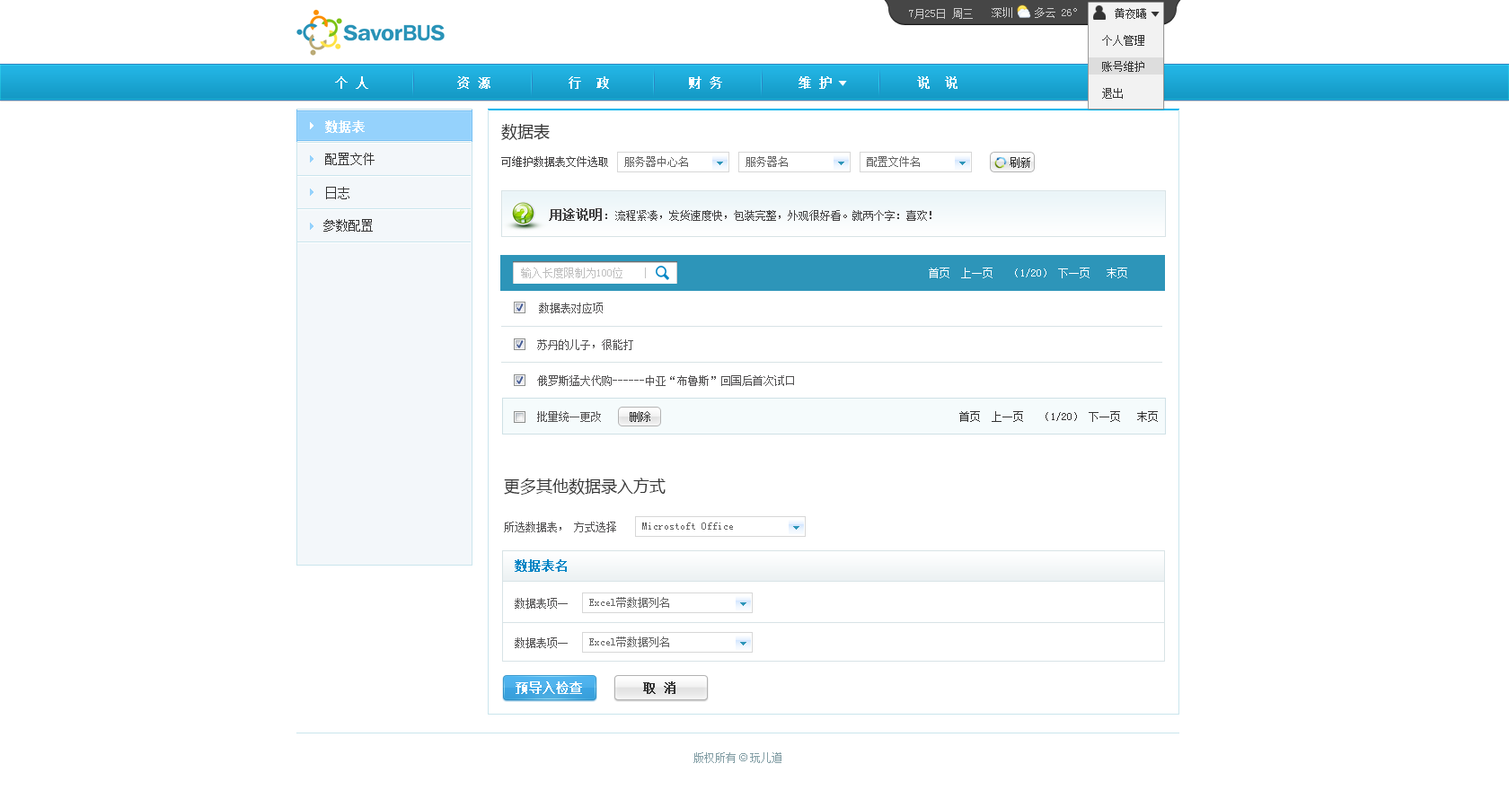
<style>
.page{position:relative;width:1509px;height:790px;background:#ffffff}
.page>*{position:absolute;margin:0}
.t1{font:10.8px "SimSun";color:#cccccc}
.t2{font:10.8px "SimSun";color:#333333}
.t3{font:12.6px "SimSun";color:#ffffff;font-weight:bold}
.t4{font:12.6px "SimSun";color:#fefefe;font-weight:bold}
.t5{font:16.2px "MicrosoftYaHei";color:#333333}
.t6{font:12.6px "SimSun";color:#333333}
.t7{font:10.8px "SimSun";color:#424142}
.t8{font:10.8px "SimSun";color:#666666}
.t9{font:12.6px "SimSun";color:#424142;font-weight:bold}
.t10{font:12.6px "SimSun";color:#424142}
.t11{font:10.8px "SimSun";color:#bfbfbf}
.t12{font:10.8px "SimSun";color:#ffffff}
.t13{font:10.8px "SimSun";color:#535253}
.t14{font:12.6px "SimSun";color:#0085c5;font-weight:bold}
.t15{font:12.6px "SimSun";color:#333333;font-weight:bold}
.t16{font:10.8px "SimSun";color:#849fa6}
.t17{font:10.8px "ArialMT";color:#849fa6}
</style>
<div class="page">
<p class="t1" style="left:909px;top:8px;width:64px;height:11px">7月25日 周三</p>
<p class="t1" style="left:991px;top:7px;width:86px;height:11px">深圳    多云 26°</p>
<p class="t2" style="left:1115px;top:8px;width:31px;height:11px">黄夜曦</p>
<p class="t2" style="left:1115px;top:8px;width:31px;height:11px">黄夜曦</p>
<p class="t2" style="left:1102px;top:35px;width:42px;height:11px">个人管理</p>
<p class="t2" style="left:1102px;top:61px;width:42px;height:11px">账号维护</p>
<p class="t3" style="left:335px;top:76px;width:622px;height:13px">个 人         资 源           行  政           财 务       维 护          说  说</p>
<p class="t2" style="left:1102px;top:88px;width:21px;height:11px">退出</p>
<p class="t4" style="left:325px;top:120px;width:40px;height:13px">数据表</p>
<p class="t5" style="left:501px;top:124px;width:49px;height:16px">数据表</p>
<p class="t6" style="left:325px;top:153px;width:50px;height:12px">配置文件</p>
<p class="t7" style="left:501px;top:156px;width:107px;height:11px">可维护数据表文件选取</p>
<p class="t8" style="left:624px;top:156px;width:64px;height:11px">服务器中心名</p>
<p class="t8" style="left:745px;top:156px;width:43px;height:11px">服务器名</p>
<p class="t8" style="left:867px;top:156px;width:53px;height:11px">配置文件名</p>
<p class="t2" style="left:1009px;top:157px;width:21px;height:11px">刷新</p>
<p class="t6" style="left:326px;top:187px;width:23px;height:12px">日志</p>
<p class="t7" style="left:549px;top:208px;width:382px;height:13px"><span class="t9">用途说明</span><span class="t10">：</span>流程紧凑，发货速度快，包装完整，外观很好看。就两个字：喜欢！</p>
<p class="t6" style="left:323px;top:219px;width:50px;height:13px">参数配置</p>
<p class="t11" style="left:521px;top:268px;width:101px;height:10px">输入长度限制为100位</p>
<p class="t12" style="left:929px;top:268px;width:198px;height:10px">首页  上一页   （1/20） 下一页   末页</p>
<p class="t13" style="left:539px;top:303px;width:64px;height:10px">数据表对应项</p>
<p class="t13" style="left:537px;top:339px;width:96px;height:11px">苏丹的儿子，很能打</p>
<p class="t13" style="left:537px;top:375px;width:257px;height:11px">俄罗斯猛犬代购------中亚“布鲁斯”回国后首次试口</p>
<p class="t13" style="left:537px;top:411px;width:64px;height:11px">批量统一更改</p>
<p class="t2" style="left:630px;top:411px;width:20px;height:11px">删除</p>
<p class="t2" style="left:959px;top:411px;width:199px;height:11px">首页  上一页   （1/20） 下一页   末页</p>
<p class="t5" style="left:504px;top:478px;width:161px;height:17px">更多其他数据录入方式</p>
<p class="t13" style="left:504px;top:522px;width:112px;height:11px">所选数据表， 方式选择</p>
<p class="t8" style="left:642px;top:523px;width:91px;height:7px">Microstoft Office</p>
<p class="t14" style="left:515px;top:560px;width:52px;height:12px">数据表名</p>
<p class="t13" style="left:515px;top:598px;width:53px;height:11px">数据表项一</p>
<p class="t8" style="left:589px;top:597px;width:80px;height:11px">Excel带数据列名</p>
<p class="t13" style="left:515px;top:638px;width:53px;height:10px">数据表项一</p>
<p class="t8" style="left:589px;top:637px;width:80px;height:11px">Excel带数据列名</p>
<p class="t3" style="left:516px;top:682px;width:66px;height:12px">预导入检查</p>
<p class="t15" style="left:643px;top:682px;width:32px;height:12px">取 消</p>
<p class="t16" style="left:693px;top:753px;width:88px;height:10px">版权所有<span class="t17"> © </span>玩儿道</p>
</div>
